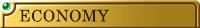
<style>
.page{position:relative;width:200px;height:28px}
.page>*{position:absolute;margin:0}
.t1{font:16px "CenturySchoolbook";letter-spacing:0.025em;color:#321a02}
</style>
<div class="page">
<p class="t1" style="left:19px;top:9px;width:90px;height:13px">ECONOMY</p>
</div>
